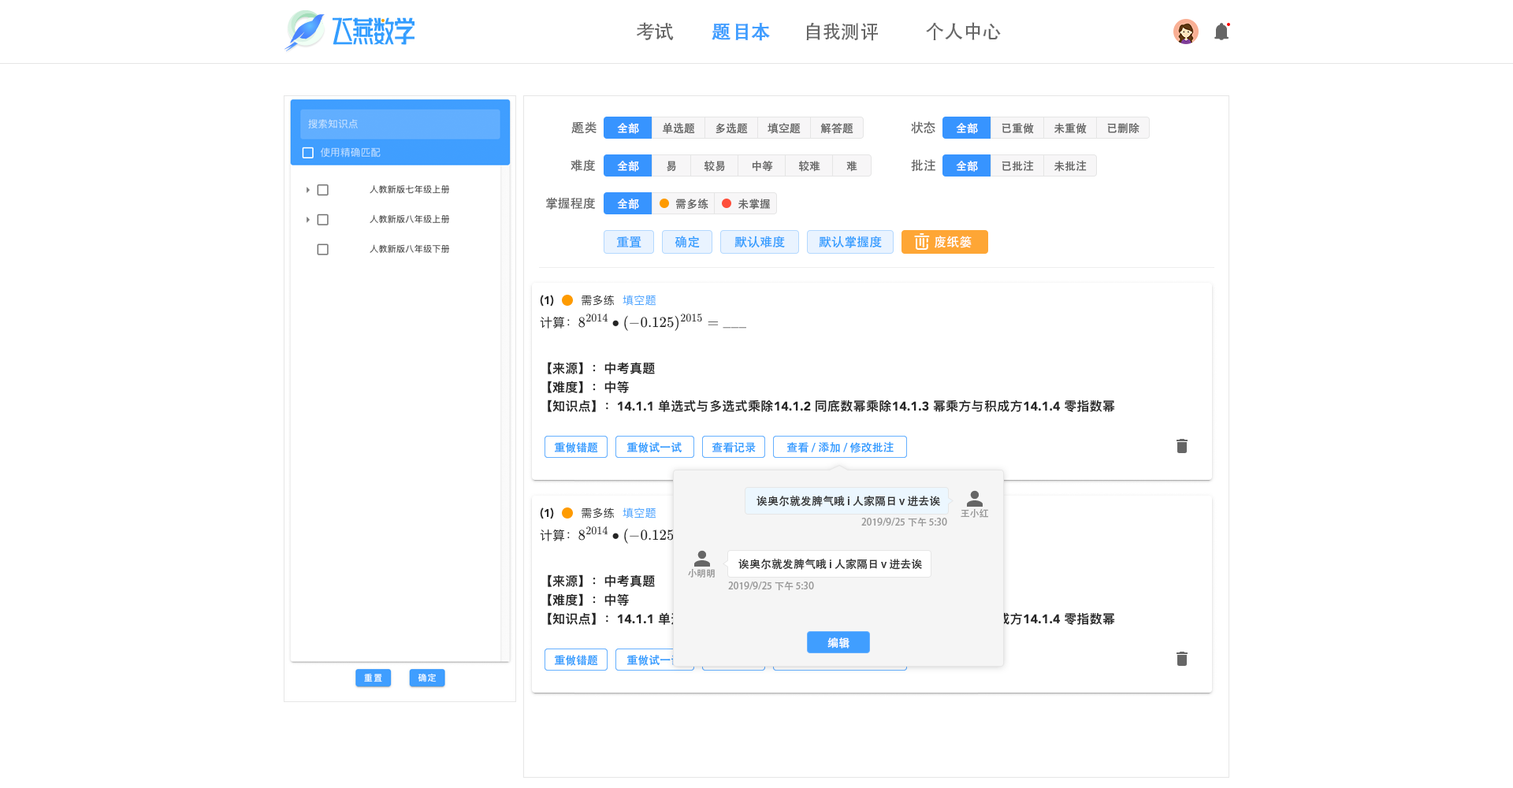
<style>
.page{position:relative;width:1513px;height:788px;background:#ffffff}
.page>*{position:absolute;margin:0}
.t1{font:18.9px "AdobeHeitiStd-Regular";color:#666666}
.t2{font:18.9px "AdobeHeitiStd-Regular";color:#409eff;font-weight:bold}
.t3{font:12.6px "AdobeHeitiStd-Regular";color:#666666}
.t4{font:11px "AdobeHeitiStd-Regular";color:#ffffff}
.t5{font:11px "AdobeHeitiStd-Regular";color:#666666}
.t6{font:12.6px "AdobeHeitiStd-Regular";color:#339dff}
.t7{font:12.6px "AdobeHeitiStd-Regular";color:#ffffff}
.t8{font:11px "AdobeHeitiStd-Regular";color:#339dff}
.t9{font:11px "AdobeHeitiStd-Regular";color:#333333}
.t10{font:9.5px "AdobeHeitiStd-Regular";color:#999999}
</style>
<div class="page">
<p class="t1" style="left:636px;top:22px;width:38px;height:18px">考试</p>
<p class="t2" style="left:712px;top:23px;width:58px;height:18px">题目本</p>
<p class="t1" style="left:806px;top:22px;width:72px;height:19px">自我测评</p>
<p class="t1" style="left:926px;top:22px;width:75px;height:18px">个人中心</p>
<p class="t3" style="left:571px;top:121px;width:26px;height:13px">题类</p>
<p class="t4" style="left:617px;top:123px;width:22px;height:11px">全部</p>
<p class="t5" style="left:663px;top:122px;width:32px;height:12px">单选题</p>
<p class="t5" style="left:716px;top:122px;width:32px;height:12px">多选题</p>
<p class="t5" style="left:768px;top:123px;width:33px;height:11px">填空题</p>
<p class="t5" style="left:820px;top:123px;width:33px;height:11px">解答题</p>
<p class="t3" style="left:911px;top:121px;width:24px;height:13px">状态</p>
<p class="t4" style="left:956px;top:123px;width:22px;height:11px">全部</p>
<p class="t5" style="left:1002px;top:123px;width:32px;height:11px">已重做</p>
<p class="t5" style="left:1054px;top:123px;width:33px;height:11px">未重做</p>
<p class="t5" style="left:1107px;top:123px;width:33px;height:10px">已删除</p>
<p class="t3" style="left:571px;top:159px;width:25px;height:13px">难度</p>
<p class="t4" style="left:617px;top:161px;width:22px;height:11px">全部</p>
<p class="t5" style="left:667px;top:161px;width:9px;height:11px">易</p>
<p class="t5" style="left:705px;top:161px;width:20px;height:11px">较易</p>
<p class="t5" style="left:752px;top:161px;width:21px;height:10px">中等</p>
<p class="t5" style="left:799px;top:161px;width:21px;height:11px">较难</p>
<p class="t5" style="left:846px;top:161px;width:11px;height:11px">难</p>
<p class="t3" style="left:911px;top:159px;width:24px;height:13px">批注</p>
<p class="t4" style="left:956px;top:161px;width:22px;height:11px">全部</p>
<p class="t5" style="left:1002px;top:160px;width:32px;height:11px">已批注</p>
<p class="t5" style="left:1054px;top:160px;width:33px;height:12px">未批注</p>
<p class="t3" style="left:546px;top:197px;width:50px;height:13px">掌握程度</p>
<p class="t4" style="left:617px;top:199px;width:22px;height:11px">全部</p>
<p class="t5" style="left:676px;top:199px;width:32px;height:11px">需多练</p>
<p class="t5" style="left:738px;top:199px;width:32px;height:11px">未掌握</p>
<p class="t6" style="left:616px;top:236px;width:25px;height:11px">重置</p>
<p class="t6" style="left:675px;top:236px;width:25px;height:12px">确定</p>
<p class="t6" style="left:734px;top:236px;width:51px;height:12px">默认难度</p>
<p class="t6" style="left:819px;top:236px;width:63px;height:12px">默认掌握度</p>
<p class="t7" style="left:935px;top:236px;width:37px;height:12px">废纸篓</p>
<p class="t8" style="left:554px;top:442px;width:44px;height:11px">重做错题</p>
<p class="t8" style="left:554px;top:442px;width:44px;height:11px">重做错题</p>
<p class="t8" style="left:627px;top:442px;width:55px;height:11px">重做试一试</p>
<p class="t8" style="left:627px;top:442px;width:55px;height:11px">重做试一试</p>
<p class="t8" style="left:712px;top:442px;width:44px;height:11px">查看记录</p>
<p class="t8" style="left:712px;top:442px;width:44px;height:11px">查看记录</p>
<p class="t8" style="left:786px;top:441px;width:108px;height:12px">查看/添加/修改批注</p>
<p class="t8" style="left:786px;top:441px;width:108px;height:12px">查看/添加/修改批注</p>
<p class="t9" style="left:757px;top:495px;width:183px;height:12px">诶奥尔就发脾气哦 i 人家隔日 v 进去诶</p>
<p class="t10" style="left:961px;top:509px;width:27px;height:9px">王小红</p>
<p class="t10" style="left:861px;top:518px;width:86px;height:8px">2019/9/25 下午5:30</p>
<p class="t9" style="left:738px;top:558px;width:184px;height:12px">诶奥尔就发脾气哦 i 人家隔日 v 进去诶</p>
<p class="t10" style="left:688px;top:569px;width:27px;height:9px">小明明</p>
<p class="t10" style="left:728px;top:582px;width:86px;height:8px">2019/9/25 下午5:30</p>
<p class="t4" style="left:827px;top:638px;width:23px;height:11px">编辑</p>
<p class="t8" style="left:554px;top:655px;width:44px;height:11px">重做错题</p>
<p class="t8" style="left:554px;top:655px;width:44px;height:11px">重做错题</p>
<p class="t8" style="left:627px;top:655px;width:55px;height:11px">重做试一试</p>
<p class="t8" style="left:627px;top:655px;width:55px;height:11px">重做试一试</p>
</div>
